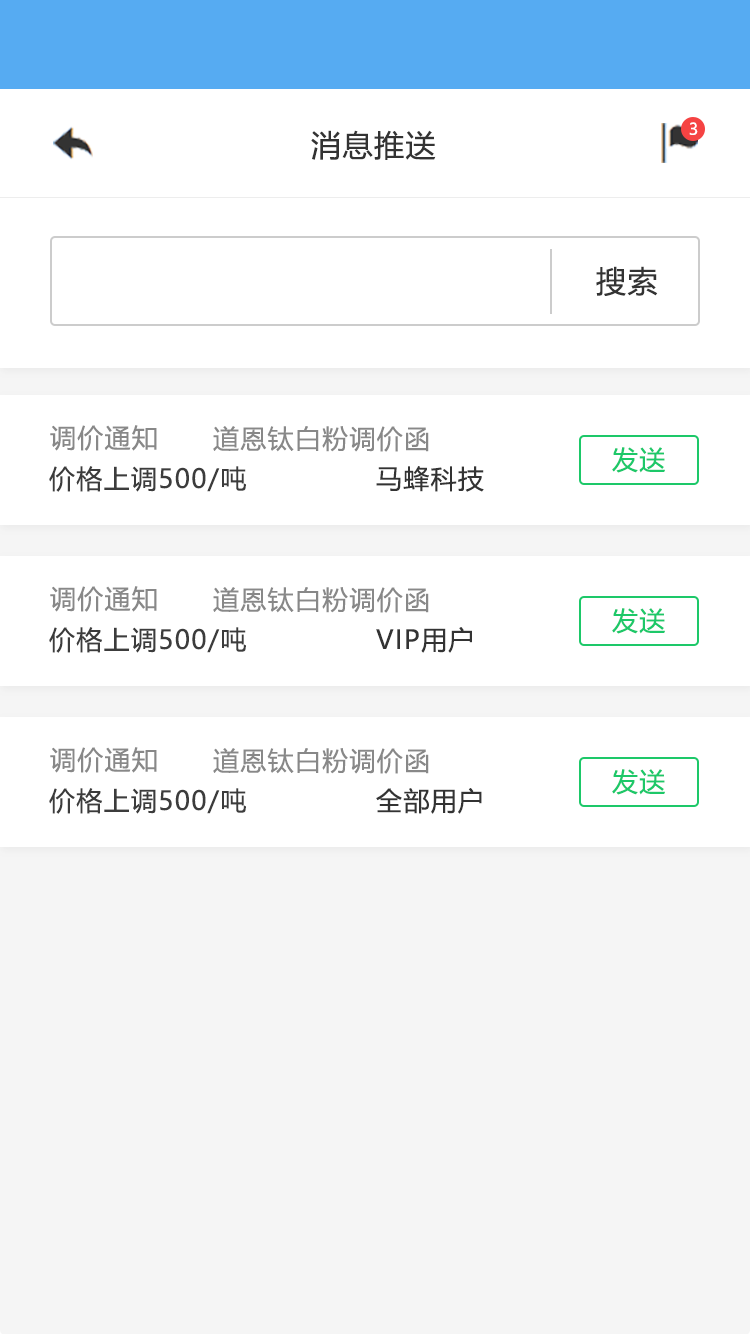
<style>
.page{position:relative;width:750px;height:1334px;background:#ffffff}
.page>*{position:absolute;margin:0}
.t1{font:16px "MicrosoftYaHeiUI";color:#ffffff}
.t2{font:30px "MicrosoftYaHeiUI";letter-spacing:0.05em;color:#333333}
.t3{font:26px "MicrosoftYaHeiUI";letter-spacing:0.05em;color:#888888}
.t4{font:26px "MicrosoftYaHeiUI";letter-spacing:0.05em;color:#1dc869}
.t5{font:26px "MicrosoftYaHeiUI";letter-spacing:0.05em;color:#3c3c3c}
.t6{font:26px "MicrosoftYaHeiUI";letter-spacing:0.05em;color:#333333}
</style>
<div class="page">
<p class="t1" style="left:689px;top:122px;width:9px;height:13px">3</p>
<p class="t2" style="left:311px;top:130px;width:125px;height:30px">消息推送</p>
<p class="t2" style="left:596px;top:266px;width:62px;height:30px">搜索</p>
<p class="t3" style="left:50px;top:425px;width:107px;height:26px">调价通知</p>
<p class="t3" style="left:213px;top:426px;width:216px;height:26px">道恩钛白粉调价函</p>
<p class="t4" style="left:612px;top:447px;width:53px;height:26px">发送</p>
<p class="t5" style="left:49px;top:466px;width:197px;height:26px">价格上调500/吨</p>
<p class="t6" style="left:376px;top:466px;width:108px;height:26px">马蜂科技</p>
<p class="t3" style="left:50px;top:586px;width:107px;height:26px">调价通知</p>
<p class="t3" style="left:213px;top:587px;width:216px;height:26px">道恩钛白粉调价函</p>
<p class="t4" style="left:612px;top:608px;width:53px;height:26px">发送</p>
<p class="t5" style="left:49px;top:627px;width:197px;height:26px">价格上调500/吨</p>
<p class="t6" style="left:376px;top:627px;width:96px;height:26px">VIP用户</p>
<p class="t3" style="left:50px;top:747px;width:107px;height:26px">调价通知</p>
<p class="t3" style="left:213px;top:748px;width:216px;height:26px">道恩钛白粉调价函</p>
<p class="t4" style="left:612px;top:769px;width:53px;height:26px">发送</p>
<p class="t5" style="left:49px;top:788px;width:197px;height:26px">价格上调500/吨</p>
<p class="t6" style="left:376px;top:788px;width:106px;height:26px">全部用户</p>
</div>
